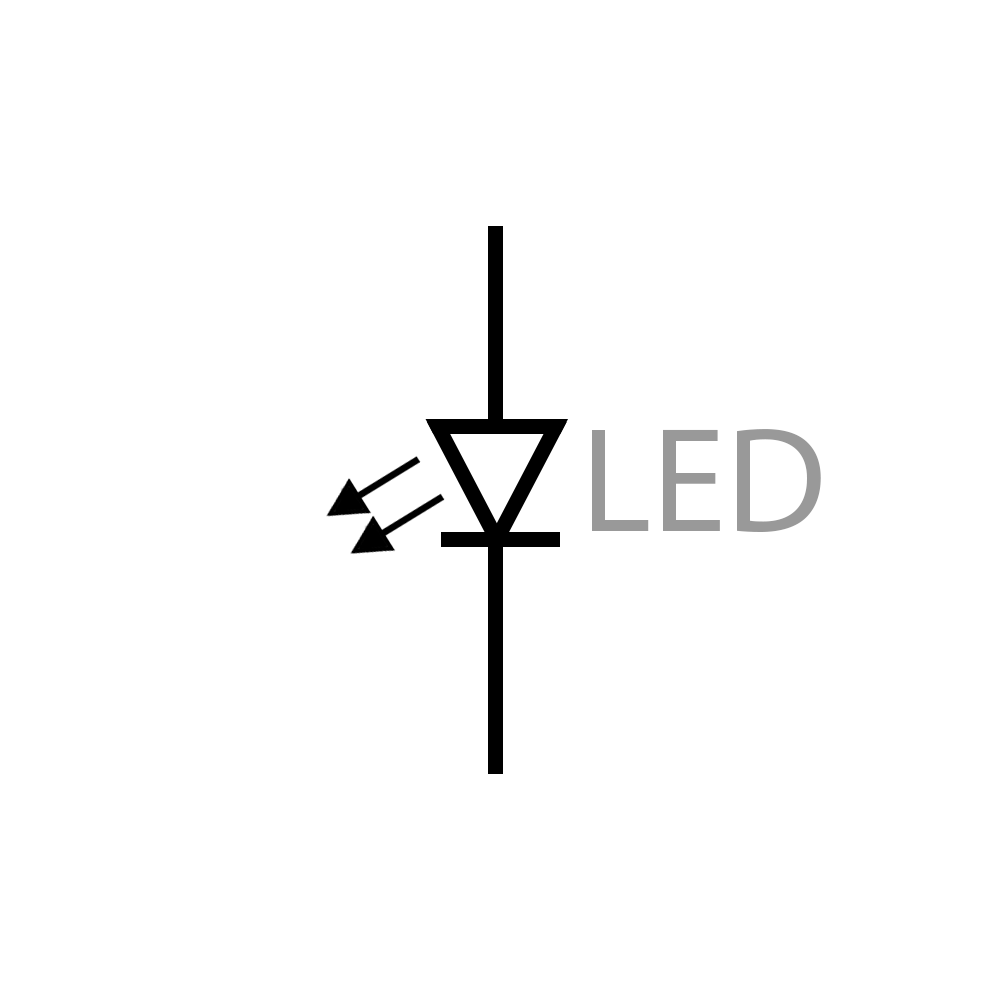
<style>
.page{position:relative;width:1000px;height:1000px;background:#ffffff}
.page>*{position:absolute;margin:0}
.t1{font:150.2px "MyriadPro-Regular";color:#999999}
</style>
<div class="page">
<p class="t1" style="left:592px;top:429px;width:229px;height:103px">LED</p>
</div>
